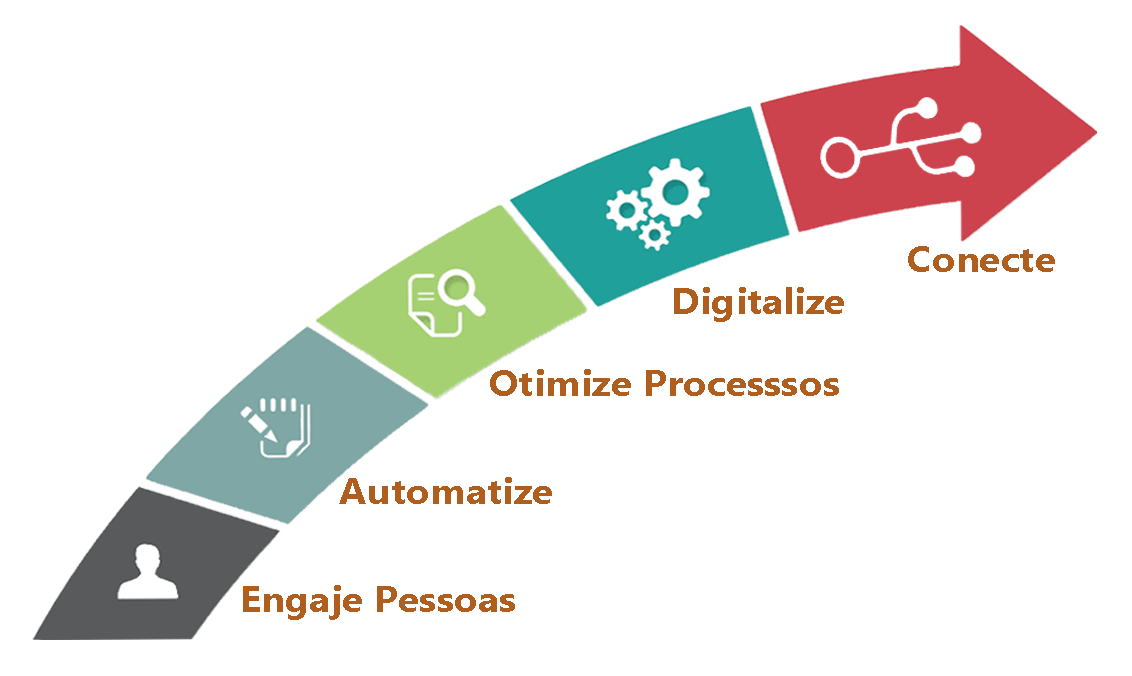
<style>
.page{position:relative;width:1132px;height:676px;background:#ffffff}
.page>*{position:absolute;margin:0}
.t1{font:36px "Gadugi-Bold";color:#b05e1e;scale:1.09 1}
</style>
<div class="page">
<p class="t1" style="left:908px;top:246px;width:147px;height:26px">Conecte</p>
<p class="t1" style="left:674px;top:287px;width:170px;height:35px">Digitalize</p>
<p class="t1" style="left:490px;top:369px;width:349px;height:27px">Otimize Processsos</p>
<p class="t1" style="left:339px;top:477px;width:213px;height:27px">Automatize</p>
<p class="t1" style="left:243px;top:585px;width:272px;height:35px">Engaje Pessoas</p>
</div>
